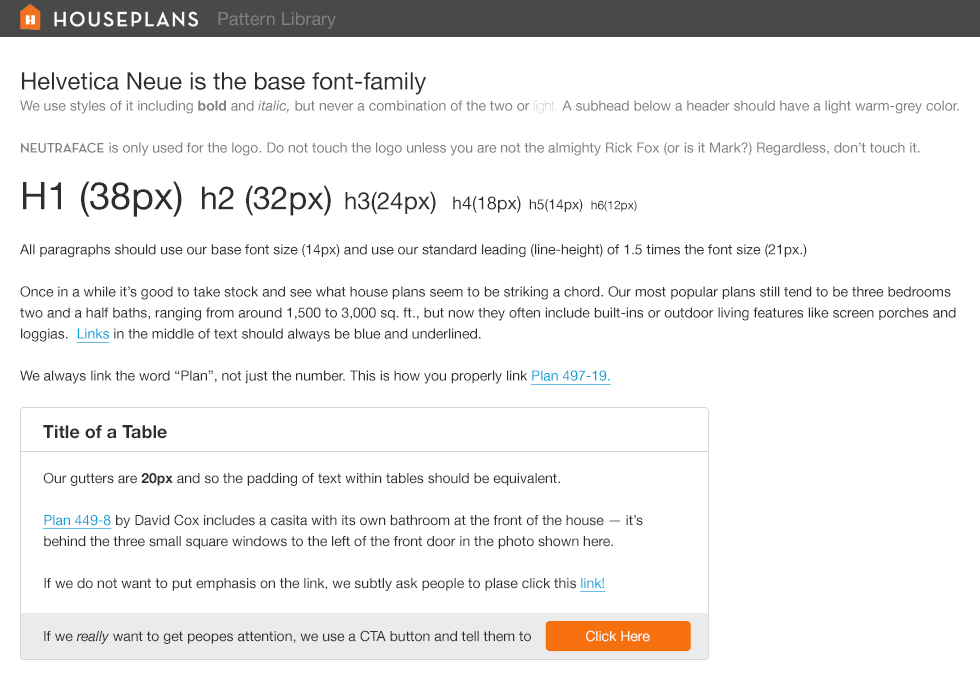
<style>
.page{position:relative;width:980px;height:700px;background:#ffffff}
.page>*{position:absolute;margin:0}
.t1{font:18px "HelveticaNeue";color:#7f7f7f}
.t2{font:14px/21px "HelveticaNeue";color:#7f7f7f}
.t3{font:24px/21px "HelveticaNeue";color:#2f2e2f}
.t4{font:14px/21px "HelveticaNeue-Bold";color:#7f7f7f}
.t5{font:14px/21px "HelveticaNeue-Italic";color:#7f7f7f}
.t6{font:14px/21px "HelveticaNeue-UltraLight";color:#7f7f7f}
.t7{font:14px/21px "NeutrafaceDisplay-BoldAlt";color:#7f7f7f;text-transform:uppercase}
.t8{font:38px "HelveticaNeue";color:#2f2e2f}
.t9{font:32px "HelveticaNeue";color:#2f2e2f}
.t10{font:24px "HelveticaNeue";color:#2f2e2f}
.t11{font:18px "HelveticaNeue";color:#2f2e2f}
.t12{font:14px "HelveticaNeue";color:#2f2e2f}
.t13{font:12px "HelveticaNeue";color:#2f2e2f}
.t14{font:14px/21px "HelveticaNeue";color:#2f2e2f}
.t15{font:14px/21px "HelveticaNeue";color:#00a1d9;text-decoration:underline}
.t16{font:18px "HelveticaNeue-Bold";color:#2f2e2f}
.t17{font:14px/21px "HelveticaNeue-Bold";color:#2f2e2f}
.t18{font:14px "HelveticaNeue-Italic";color:#2f2e2f}
.t19{font:14px "HelveticaNeue";color:#ffffff}
</style>
<div class="page">
<p class="t1" style="left:218px;top:12px;width:118px;height:17px">Pattern Library</p>
<p class="t2" style="left:20px;top:72px;width:939px;height:84px"><span class="t3">Helvetica Neue is the base font-family<br></span>We use styles of it including <span class="t4">bold</span> and <span class="t5">italic, </span>but never a combination of the two or <span class="t6">light. </span>A subhead below a header should have a light warm-grey color.<br><br><span class="t7">Neutraface</span> is only used for the logo. Do not touch the logo unless you are not the almighty Rick Fox (or is it Mark?) Regardless, don’t touch it.</p>
<p class="t8" style="left:23px;top:181px;width:614px;height:36px">H1 (38px) <span class="t9">h2 (32px) </span><span class="t10">h3(24px) </span><span class="t11">h4(18px)  </span><span class="t12">h5(14px)  </span><span class="t13">h6(12px)</span></p>
<p class="t14" style="left:20px;top:244px;width:936px;height:141px">All paragraphs should use our base font size (14px) and use our standard leading (line-height) of 1.5 times the font size (21px.)<br><br>Once in a while it’s good to take stock and see what house plans seem to be striking a chord. Our most popular plans still tend to be three bedrooms two and a half baths, ranging from around 1,500 to 3,000 sq. ft., but now they often include built-ins or outdoor living features like screen porches and loggias.  <span class="t15">Links</span> in the middle of text should always be blue and underlined.<br><br>We always link the word “Plan”, not just the number. This is how you properly link <span class="t15">Plan 497-19.</span></p>
<p class="t16" style="left:43px;top:425px;width:124px;height:14px">Title of a Table</p>
<p class="t14" style="left:43px;top:472px;width:600px;height:120px">Our gutters are <span class="t17">20px</span> and so the padding of text within tables should be equivalent.<br><span class="t15"><br>Plan 449-8</span> by David Cox includes a casita with its own bathroom at the front of the house — it’s behind the three small square windows to the left of the front door in the photo shown here. <br><br>If we do not want to put emphasis on the link, we subtly ask people to plase click this <span class="t15">link!</span></p>
<p class="t12" style="left:44px;top:630px;width:487px;height:14px">If we <span class="t18">really</span> want to get peopes attention, we use a CTA button and tell them to</p>
<p class="t19" style="left:586px;top:630px;width:64px;height:12px">Click Here</p>
</div>
